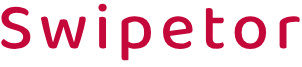
<style>
.page{position:relative;width:302px;height:67px;background:#ffffff}
.page>*{position:absolute;margin:0}
.t1{font:66.1px "Baloo2-Medium";letter-spacing:0.09em;color:#c5083a}
</style>
<div class="page">
<p class="t1" style="left:1px;top:3px;width:299px;height:58px">Swipetor</p>
</div>
